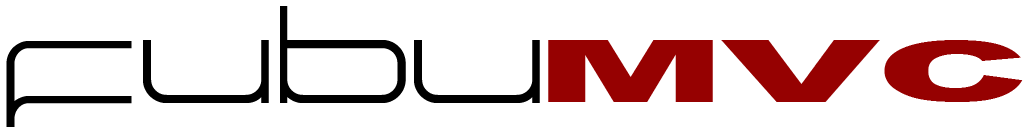
<style>
.page{position:relative;width:1028px;height:133px;background:#ffffff}
.page>*{position:absolute;margin:0}
.t1{font:210px "manu-light";color:#000000}
.t2{font:88px "GF-Viennaheavy";color:#960101}
</style>
<div class="page">
<p class="t1" style="left:6px;top:6px;width:534px;height:121px">FUBU</p>
<p class="t2" style="left:548px;top:40px;width:475px;height:62px">MVC</p>
</div>
